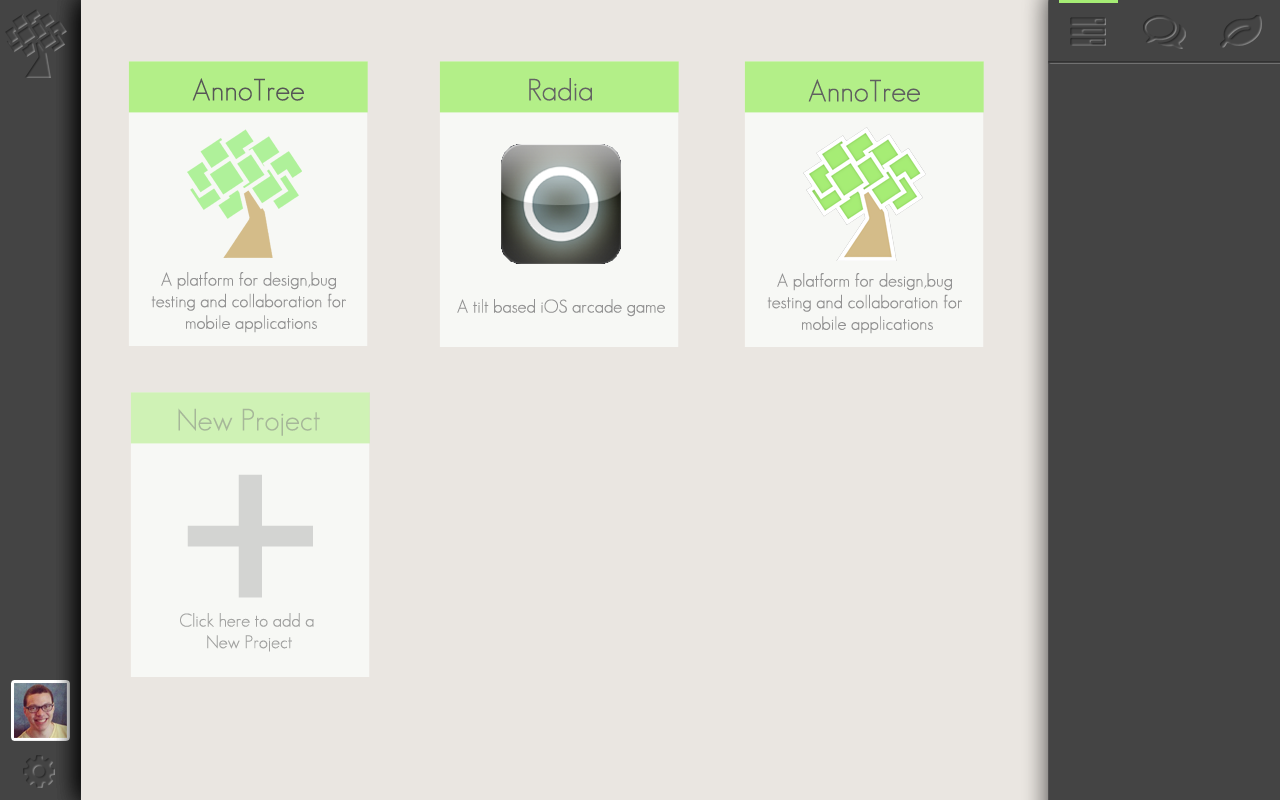
<style>
.page{position:relative;width:1280px;height:800px;background:#eae6e1}
.page>*{position:absolute;margin:0}
.t1{font:30px "GeosansLight";color:#565656}
.t2{font:30px "GeosansLight";color:#636363}
.t3{font:30px "GeosansLight";color:#5f5f5f}
.t4{font:18px "GeosansLight";color:#929292}
.t5{font:30px "GeosansLight";color:#a6b799}
.t6{font:500px "GeosansLight";color:#d3d4d2}
.t7{font:18px "GeosansLight";color:#a2a2a1}
</style>
<div class="page">
<p class="t1" style="left:192px;top:78px;width:112px;height:23px">AnnoTree</p>
<p class="t2" style="left:529px;top:78px;width:63px;height:23px">Radia</p>
<p class="t3" style="left:808px;top:79px;width:112px;height:23px">AnnoTree</p>
<p class="t4" style="left:151px;top:272px;width:195px;height:61px;text-align:center">A platform for design,bug <br>testing and collaboration for <br>mobile applications</p>
<p class="t4" style="left:767px;top:273px;width:195px;height:61px;text-align:center">A platform for design,bug <br>testing and collaboration for <br>mobile applications</p>
<p class="t4" style="left:457px;top:299px;width:208px;height:18px">A tilt based iOS arcade game</p>
<p class="t5" style="left:178px;top:408px;width:142px;height:28px">New Project</p>
<p class="t6" style="left:187px;top:474px;width:126px;height:124px">+</p>
<p class="t7" style="left:180px;top:613px;width:134px;height:39px;text-align:center">Click here to add a <br>New Project</p>
</div>
